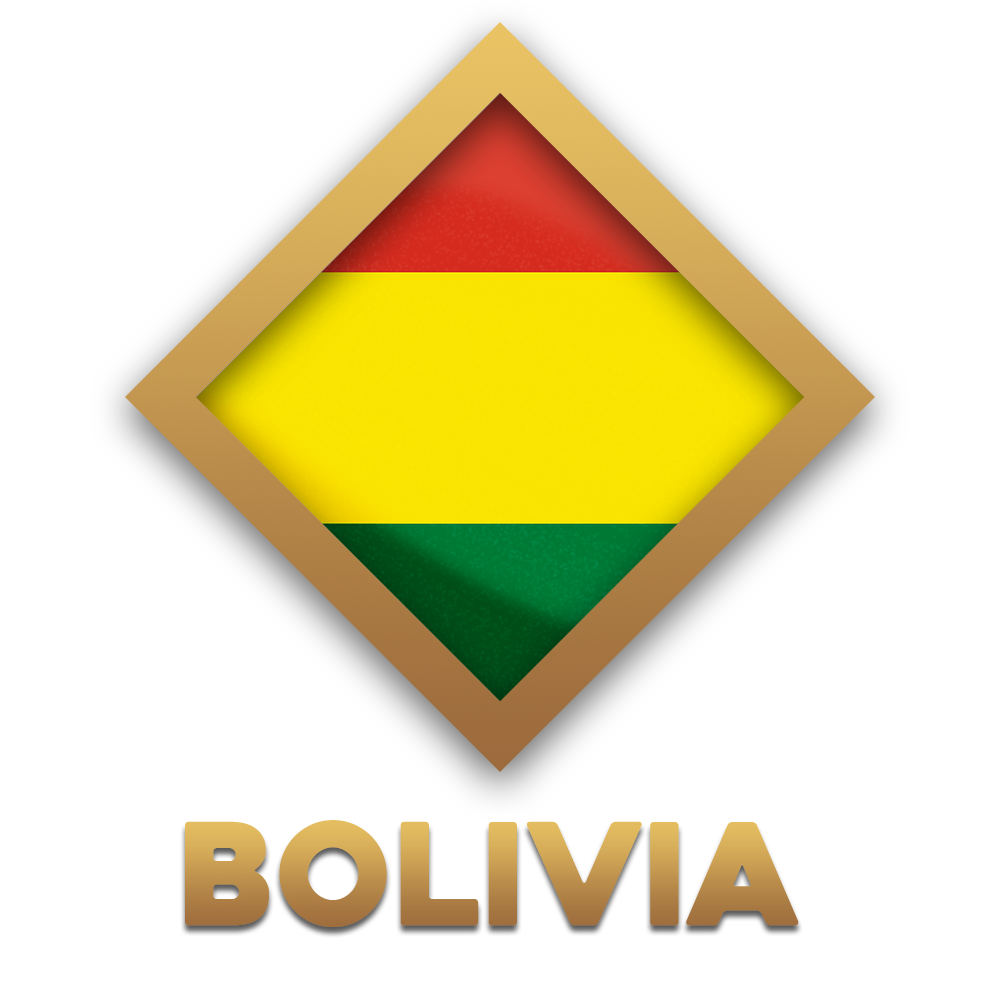
<style>
.page{position:relative;width:1000px;height:1000px;background:#ffffff}
.page>*{position:absolute;margin:0}
.t1{font:141px "Heavitas"}
</style>
<div class="page">
<p class="t1" style="left:185px;top:820px;width:614px;height:107px">Bolivia</p>
</div>
